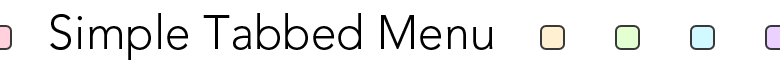
<style>
.page{position:relative;width:780px;height:66px;background:#ffffff}
.page>*{position:absolute;margin:0}
.t1{font:48px "Avenir-Light";color:#000000}
</style>
<div class="page">
<p class="t1" style="left:50px;top:13px;width:443px;height:47px">Simple Tabbed Menu</p>
</div>
